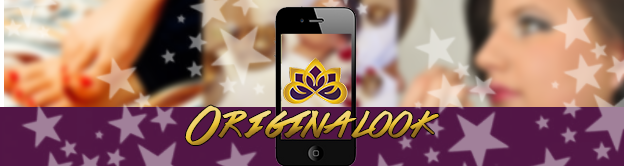
<style>
.page{position:relative;width:624px;height:166px}
.page>*{position:absolute;margin:0}
.t1{font:37.5px "ColorsOfAutumn";letter-spacing:0.05em;color:#ebc334;font-weight:bold}
</style>
<div class="page">
<p class="t1" style="left:185px;top:105px;width:254px;height:40px">Originalook</p>
</div>
